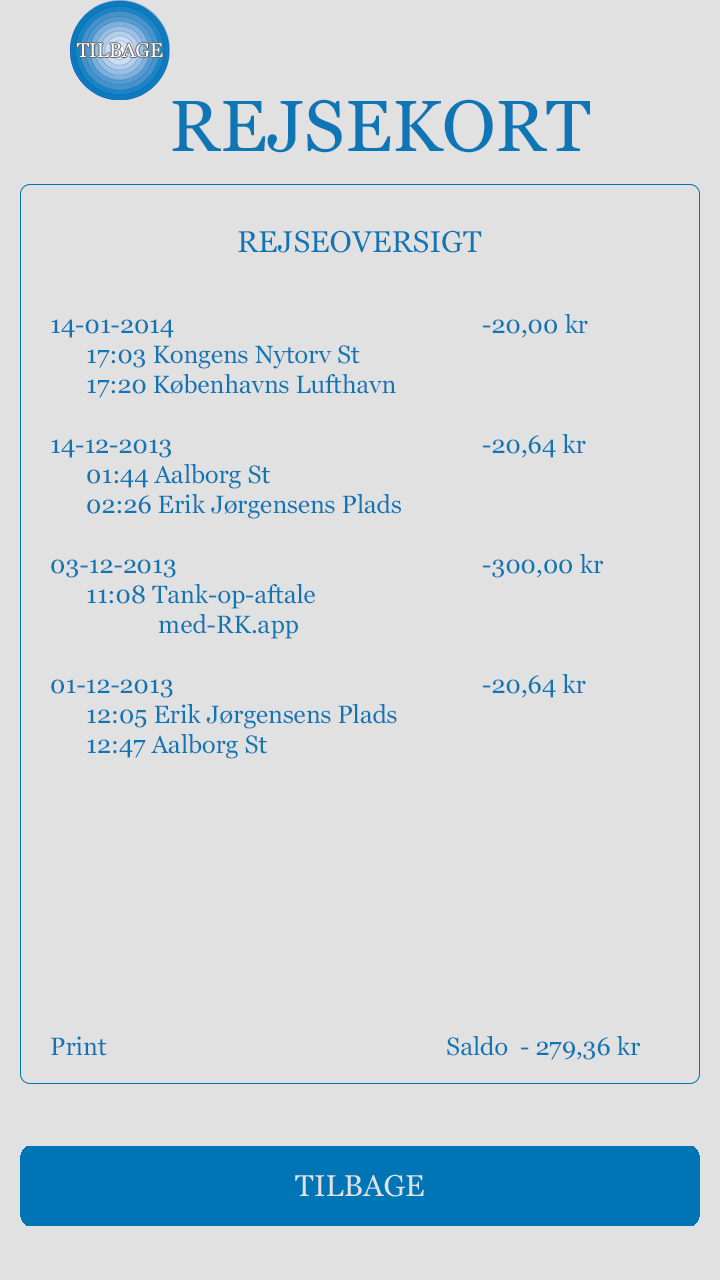
<style>
.page{position:relative;width:720px;height:1280px;background:#e1e1e1}
.page>*{position:absolute;margin:0}
.t1{font:72px "Georgia";color:#0f76b5}
.t2{font:30px "Georgia";color:#0f76b5}
.t3{font:25px "Georgia";color:#0f76b5}
</style>
<div class="page">
<p class="t1" style="left:172px;top:99px;width:418px;height:54px">REJSEKORT</p>
<p class="t2" style="left:238px;top:230px;width:244px;height:23px">REJSEOVERSIGT</p>
<p class="t3" style="left:51px;top:314px;width:552px;height:445px">14-01-2014         -20,00 kr<br> 17:03 Kongens Nytorv St<br> 17:20 Københavns Lufthavn<br><br>14-12-2013         -20,64 kr<br> 01:44 Aalborg St<br> 02:26 Erik Jørgensens Plads<br><br>03-12-2013         -300,00 kr<br> 11:08 Tank-op-aftale<br>   med-RK.app<br><br>01-12-2013         -20,64 kr<br> 12:05 Erik Jørgensens Plads<br> 12:47 Aalborg St</p>
<p class="t3" style="left:51px;top:1036px;width:589px;height:24px">Print          Saldo  - 279,36 kr</p>
</div>
